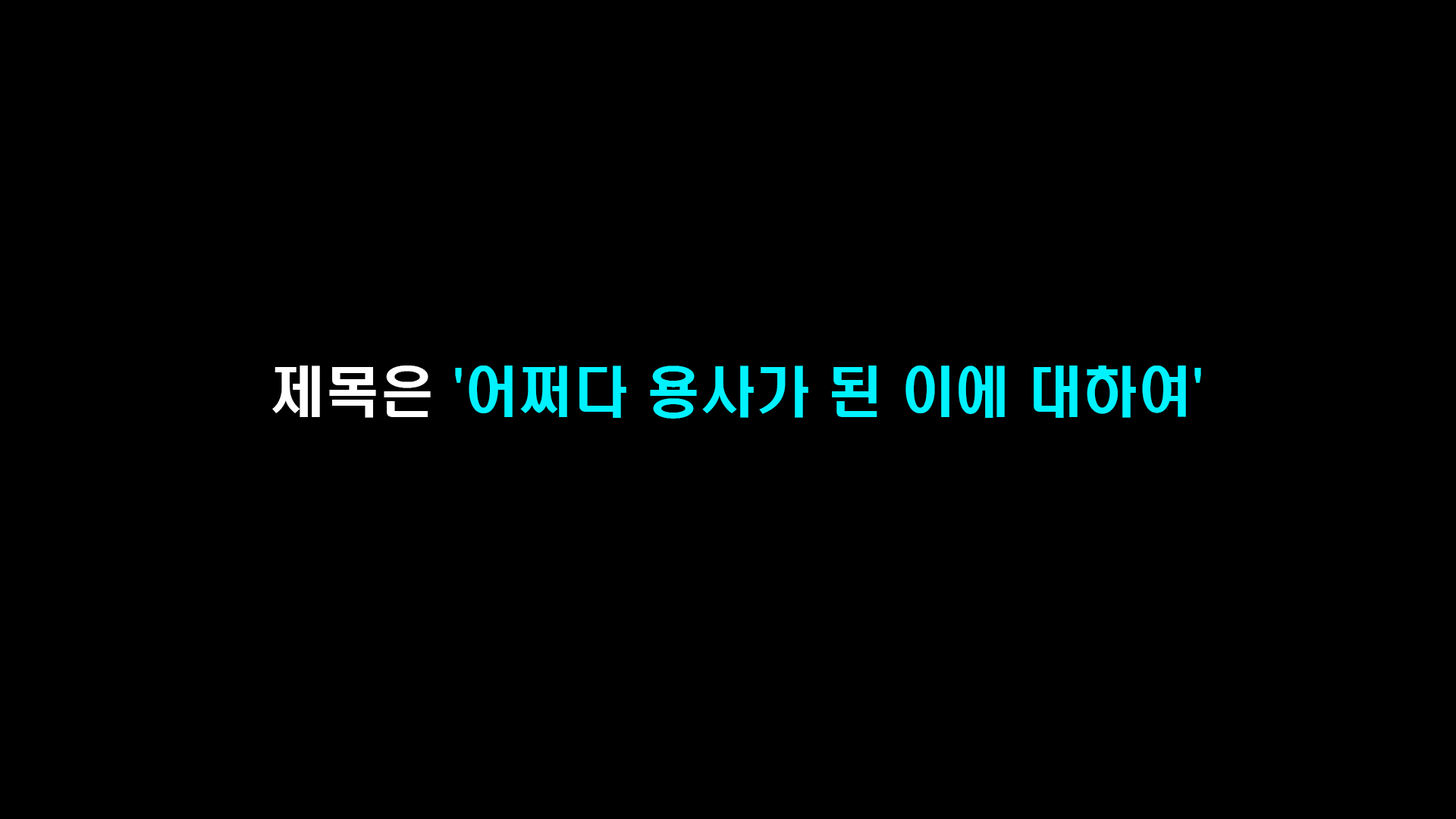
<style>
.page{position:relative;width:1456px;height:819px;background:#000000}
.page>*{position:absolute;margin:0}
.t1{font:54.6px "H2hdrM";color:#00f2ff}
.t2{font:54.6px "H2hdrM";color:#ffffff}
</style>
<div class="page">
<p class="t1" style="left:272px;top:366px;width:929px;height:53px"><span class="t2">제목은 </span>'어쩌다 용사가 된 이에 대하여'</p>
</div>
